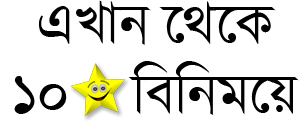
<style>
.page{position:relative;width:304px;height:139px;background:#ffffff}
.page>*{position:absolute;margin:0}
.t1{font:58.3px "KalpurushANSI";color:#000000}
.t2{font:58.3px "Kalpurush";color:#000000}
.t3{font:72px "IskoolaPota";color:#000000}
</style>
<div class="page">
<p class="t1" style="left:14px;top:0px;width:285px;height:115px;text-align:center"><span class="t2">এখান েথেক </span>10    wewbg‡q <br><span class="t3">B‡qb<br>b</span></p>
</div>
